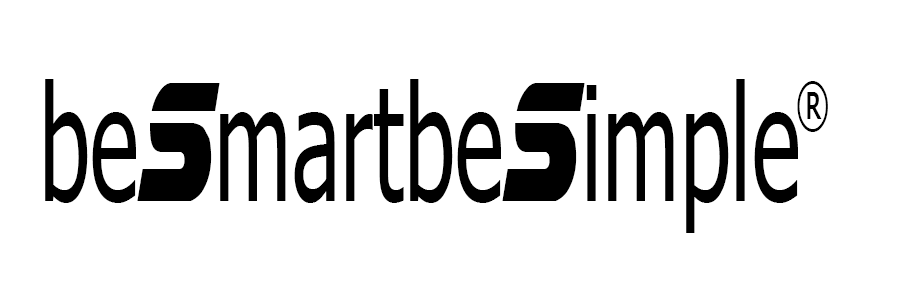
<style>
.page{position:relative;width:900px;height:300px;background:#ffffff}
.page>*{position:absolute;margin:0}
.t1{font:160px "Tahoma";color:#000000;scale:0.58 1}
.t2{font:170px "BladeRunnerMovieFont";color:#000000;scale:0.58 1}
.t3{font:60px "Tahoma";color:#000000;scale:0.6 1}
</style>
<div class="page">
<p class="t1" style="left:45px;top:79px;width:753px;height:154px">be<span class="t2">s</span>martbe<span class="t2">S</span>imple</p>
<p class="t3" style="left:797px;top:81px;width:31px;height:51px">®</p>
</div>
